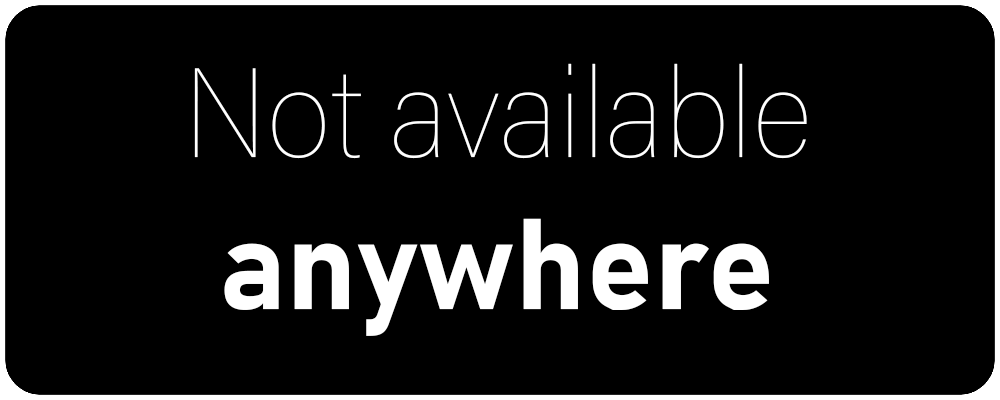
<style>
.page{position:relative;width:1000px;height:400px;background:#000000}
.page>*{position:absolute;margin:0}
.t1{font:127px "AcuminConcept-SemiCondensedThin";color:#ffffff}
.t2{font:127px "Bahnschrift-Bold";color:#ffffff}
</style>
<div class="page">
<p class="t1" style="left:194px;top:63px;width:613px;height:273px;text-align:center">Not available<br><span class="t2">anywhere</span></p>
</div>
